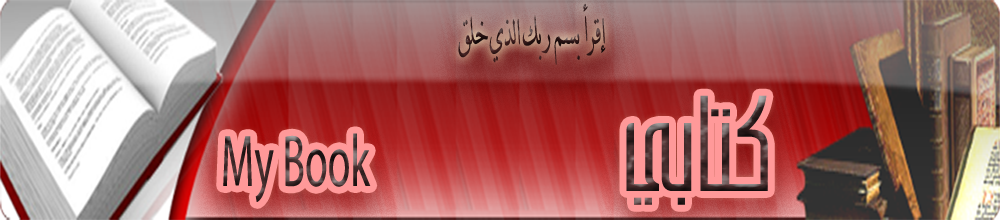
<style>
.page{position:relative;width:1000px;height:220px}
.page>*{position:absolute;margin:0}
.t1{font:44px "DTnaskh1";scale:0.56 1}
.t2{font:84.7px "SC_LUJAYN";scale:1.05 1}
.t3{font:73.3px "DTnaskh1";scale:0.56 1}
</style>
<div class="page">
<p class="t1" style="left:458px;top:3px;width:148px;height:62px">إقرأ بسم ربك الذي خلق</p>
<p class="t2" style="left:626px;top:95px;width:142px;height:110px">كتابي</p>
<p class="t3" style="left:223px;top:133px;width:148px;height:69px">My Book</p>
</div>
